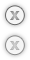
<style>
.page{position:relative;width:30px;height:60px}
.page>*{position:absolute;margin:0}
.t1{font:12.5px "GothamBlack";color:#d1d1d1}
</style>
<div class="page">
<p class="t1" style="left:10px;top:11px;width:10px;height:9px">X</p>
</div>
